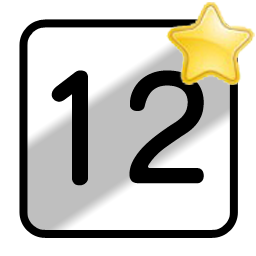
<style>
.page{position:relative;width:256px;height:256px;background:#ffffff}
.page>*{position:absolute;margin:0}
.t1{font:200px "YanoljaYacheR";letter-spacing:0.12em;color:#000000}
</style>
<div class="page">
<p class="t1" style="left:51px;top:70px;width:153px;height:116px">12</p>
</div>
